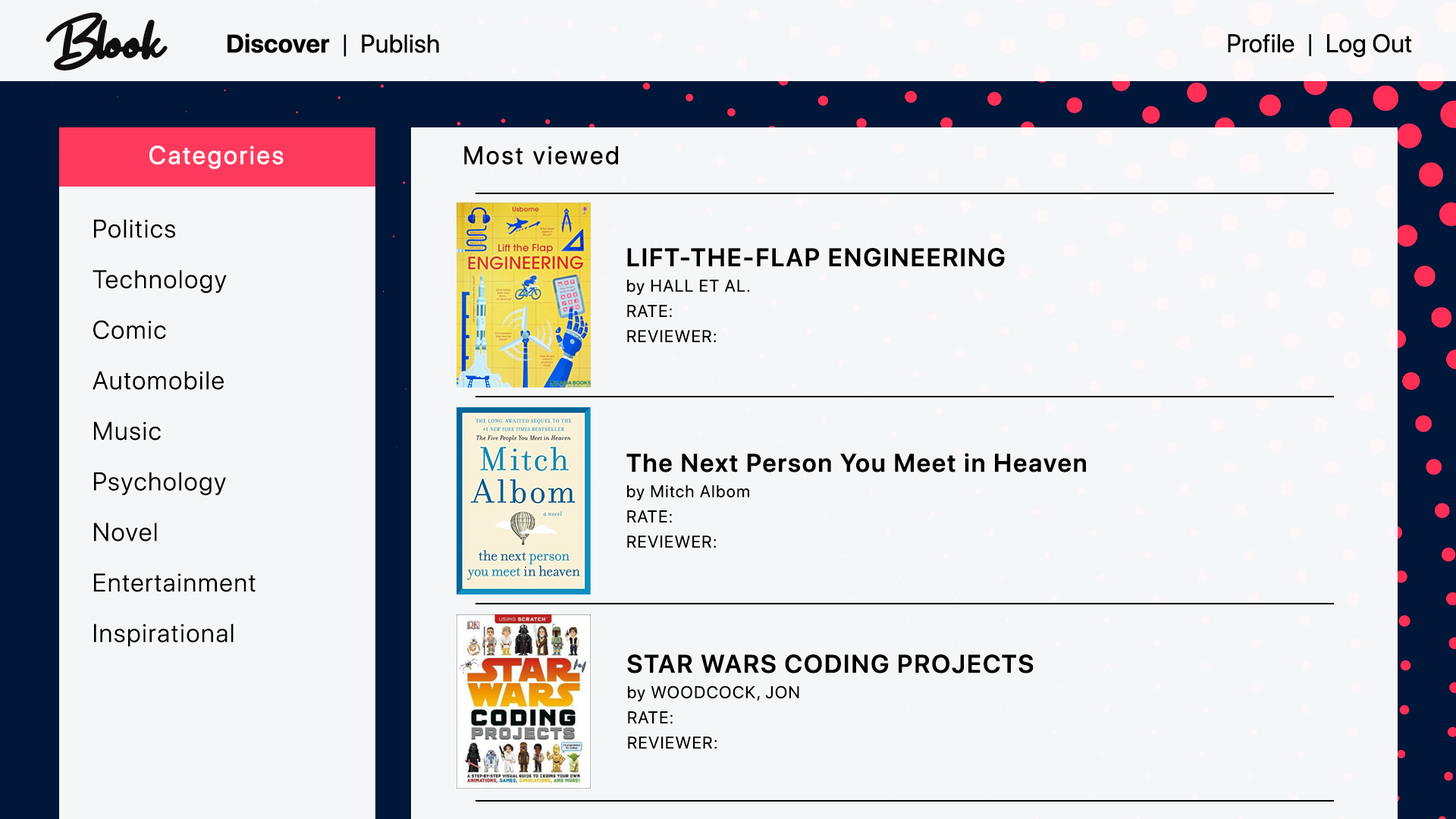
<style>
.page{position:relative;width:1456px;height:819px;background:#f5f6f7}
.page>*{position:absolute;margin:0}
.t1{font:74.5px "Get-Show";letter-spacing:-0.05em;color:#110e0f;font-weight:bold}
.t2{font:74.5px "Get-Show";letter-spacing:-0.075em;color:#110e0f;font-weight:bold}
.t3{font:25.3px "SFProDisplay-Regular";color:#000000;font-weight:bold}
.t4{font:25.3px "SFProDisplay-Bold";color:#000000;font-weight:bold}
.t5{font:25.3px "SFProDisplay-Regular";letter-spacing:0.075em;color:#ffffff;font-weight:bold}
.t6{font:25.3px "SFProDisplay-Regular";letter-spacing:0.075em;color:#000000;font-weight:bold}
.t7{font:25.3px/50.6px "SFProDisplay-Light";letter-spacing:0.05em;color:#000000;font-weight:bold}
.t8{font:16.9px/25.3px "SFProDisplay-Regular";letter-spacing:0.05em;color:#000000;font-weight:bold}
.t9{font:25.3px/25.3px "SFProDisplay-Semibold";letter-spacing:0.05em;color:#000000;font-weight:bold}
</style>
<div class="page">
<p class="t1" style="left:45px;top:12px;width:123px;height:59px"><span class="t2">B</span>look</p>
<p class="t3" style="left:227px;top:33px;width:212px;height:24px"><span class="t4">Discover</span>  |  Publish</p>
<p class="t3" style="left:1228px;top:33px;width:184px;height:25px">Profile  |  Log Out</p>
<p class="t5" style="left:149px;top:146px;width:135px;height:23px">Categories</p>
<p class="t6" style="left:464px;top:146px;width:154px;height:19px">Most viewed</p>
<p class="t7" style="left:93px;top:219px;width:163px;height:428px">Politics<br>Technology<br>Comic<br>Automobile<br>Music<br>Psychology<br>Novel<br>Entertainment<br>Inspirational</p>
<p class="t8" style="left:627px;top:248px;width:378px;height:95px"><span class="t9">LIFT-THE-FLAP ENGINEERING<br></span>by HALL ET AL.<br>RATE:  <br>REVIEWER:</p>
<p class="t9" style="left:626px;top:453px;width:460px;height:95px">The Next Person You Meet in Heaven<br><span class="t8">by Mitch Albom<br>RATE:  <br>REVIEWER:</span></p>
<p class="t8" style="left:627px;top:654px;width:407px;height:95px"><span class="t9">STAR WARS CODING PROJECTS<br></span>by WOODCOCK, JON<br>RATE:  <br>REVIEWER:</p>
</div>
